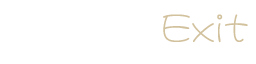
<style>
.page{position:relative;width:256px;height:64px;background:#ffffff}
.page>*{position:absolute;margin:0}
.t1{font:35.3px "DFYuanYuan-W2-HKP-BF";color:#d2c19d;font-weight:bold}
</style>
<div class="page">
<p class="t1" style="left:163px;top:14px;width:85px;height:29px">Exit</p>
</div>
